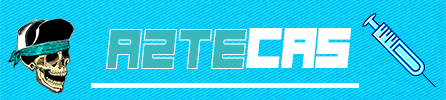
<style>
.page{position:relative;width:446px;height:100px}
.page>*{position:absolute;margin:0}
.t1{font:58.3px "Hindsight2020";color:#39b8bb;scale:0.94 1}
.t2{font:58.3px "Hindsight2020";color:#ffffff;scale:0.94 1}
</style>
<div class="page">
<p class="t1" style="left:106px;top:29px;width:141px;height:40px">azte</p>
<p class="t2" style="left:246px;top:28px;width:106px;height:40px">cas</p>
</div>
